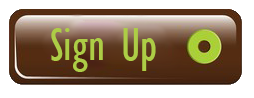
<style>
.page{position:relative;width:254px;height:98px;background:#ffffff}
.page>*{position:absolute;margin:0}
.t1{font:48px "GillSansMT-Condensed";color:#adcd46}
</style>
<div class="page">
<p class="t1" style="left:51px;top:28px;width:105px;height:44px">Sign Up</p>
</div>
